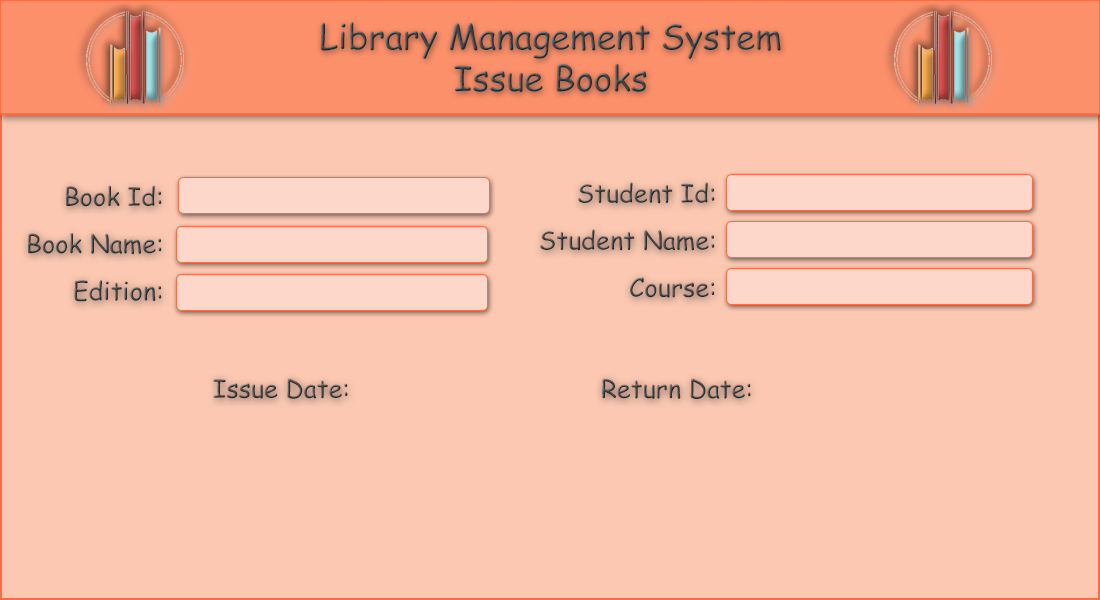
<style>
.page{position:relative;width:1100px;height:600px;background:#fcc8b1}
.page>*{position:absolute;margin:0}
.t1{font:34.7px "ComicSansMS"}
.t2{font:25.3px/47.2px "ComicSansMS";color:#444343}
.t3{font:25px "ComicSansMS";color:#444343}
.t4{font:25.3px "ComicSansMS";color:#444343}
</style>
<div class="page">
<p class="t1" style="left:320px;top:22px;width:461px;height:70px;text-align:center">Library Management System<br>Issue Books</p>
<p class="t2" style="left:28px;top:185px;width:134px;height:117px;text-align:right">Book Id:<br>Book Name:<br>Edition:</p>
<p class="t2" style="left:540px;top:182px;width:175px;height:116px;text-align:right">Student Id:<br>Student Name:<br>Course:</p>
<p class="t3" style="left:213px;top:378px;width:135px;height:21px">Issue Date:</p>
<p class="t4" style="left:602px;top:378px;width:149px;height:21px">Return Date:</p>
</div>
